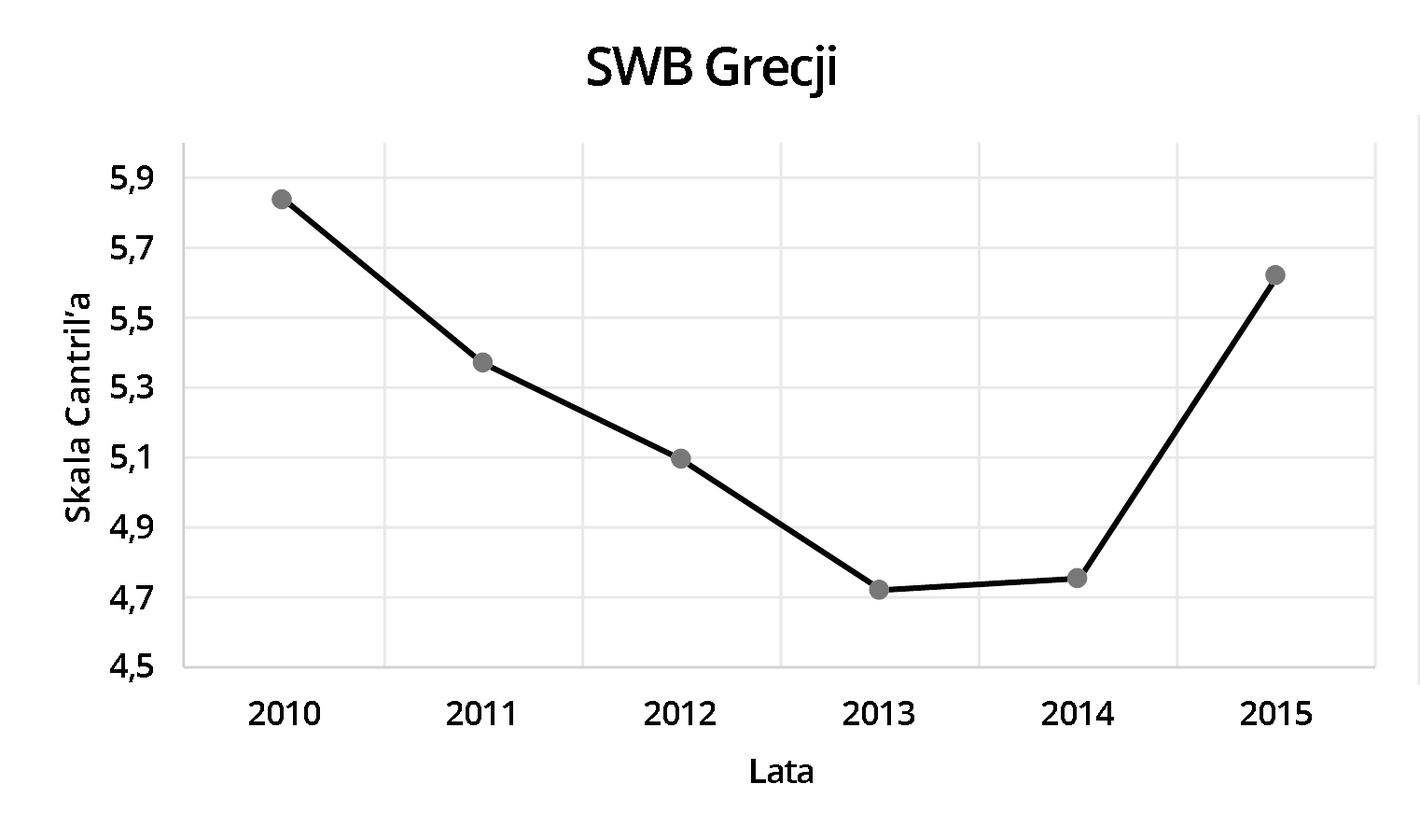
<style>
.page{position:relative;width:1420px;height:840px;background:#ffffff}
.page>*{position:absolute;margin:0}
.t1{font:53.6px "OpenSans-Semibold";letter-spacing:-0.05em;color:#000000}
.t2{font:34.9px "OpenSans-Semibold";letter-spacing:-0.05em;color:#000000}
.t3{font:34.9px "OpenSans-Semibold";letter-spacing:-0.01em;color:#000000}
</style>
<div class="page">
<p class="t1" style="left:588px;top:45px;width:248px;height:53px">SWB Grecji</p>
<p class="t2" style="left:111px;top:165px;width:42px;height:29px">5,9</p>
<p class="t2" style="left:111px;top:235px;width:42px;height:29px">5,7</p>
<p class="t3" style="left:63px;top:294px;width:27px;height:228px;rotate:-90deg">Skala Cantril’a</p>
<p class="t2" style="left:111px;top:306px;width:42px;height:29px">5,5</p>
<p class="t2" style="left:111px;top:374px;width:42px;height:29px">5,3</p>
<p class="t2" style="left:111px;top:444px;width:37px;height:29px">5,1</p>
<p class="t2" style="left:110px;top:514px;width:43px;height:29px">4,9</p>
<p class="t2" style="left:110px;top:585px;width:43px;height:29px">4,7</p>
<p class="t2" style="left:110px;top:653px;width:43px;height:29px">4,5</p>
<p class="t2" style="left:249px;top:701px;width:71px;height:24px">2010</p>
<p class="t2" style="left:447px;top:701px;width:66px;height:24px">2011</p>
<p class="t2" style="left:645px;top:701px;width:71px;height:24px">2012</p>
<p class="t2" style="left:843px;top:701px;width:71px;height:24px">2013</p>
<p class="t2" style="left:1042px;top:701px;width:72px;height:24px">2014</p>
<p class="t2" style="left:1241px;top:701px;width:71px;height:24px">2015</p>
<p class="t2" style="left:751px;top:759px;width:62px;height:24px">Lata</p>
</div>
